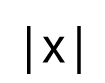
<style>
.page{position:relative;width:105px;height:83px;background:#ffffff}
.page>*{position:absolute;margin:0}
.t1{font:47.9px "DroidSans";color:#000000}
</style>
<div class="page">
<p class="t1" style="left:27px;top:26px;width:54px;height:48px">|x|</p>
</div>
